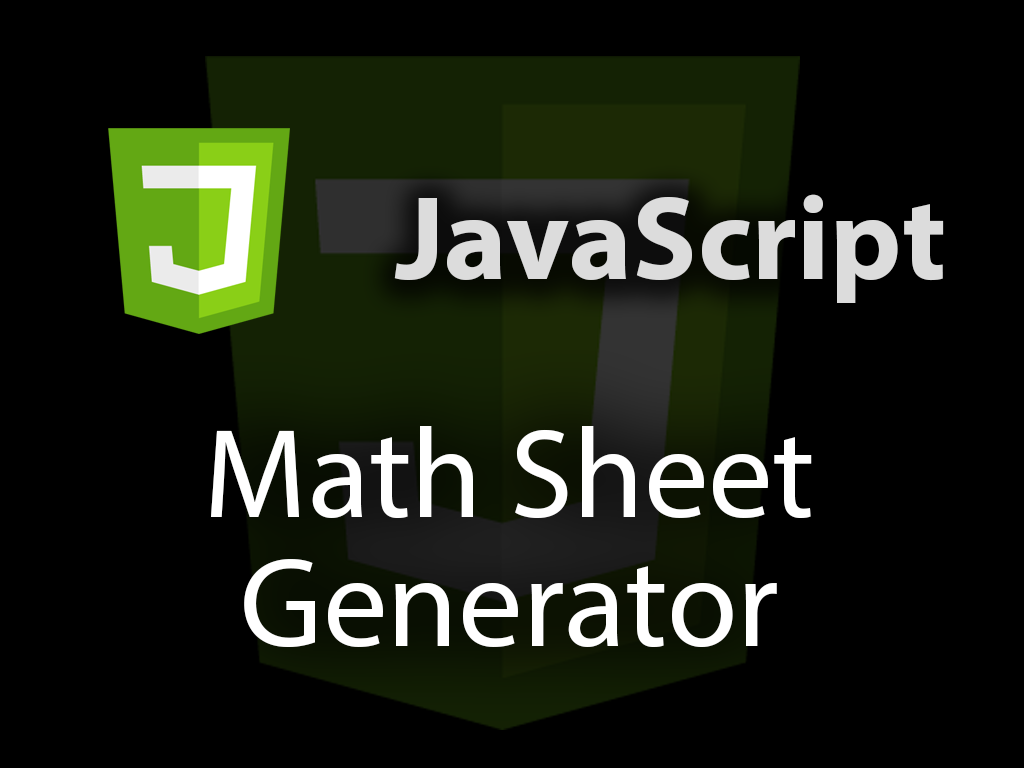
<style>
.page{position:relative;width:1024px;height:768px;background:#000000}
.page>*{position:absolute;margin:0}
.t1{font:120px "MyriadPro-Bold";color:#dcdcdc}
.t2{font:128px/128.9px "MyriadPro-Regular";color:#ffffff}
</style>
<div class="page">
<p class="t1" style="left:394px;top:194px;width:550px;height:109px">JavaScript</p>
<p class="t2" style="left:211px;top:426px;width:601px;height:221px;text-align:center">Math Sheet<br>Generator</p>
</div>
